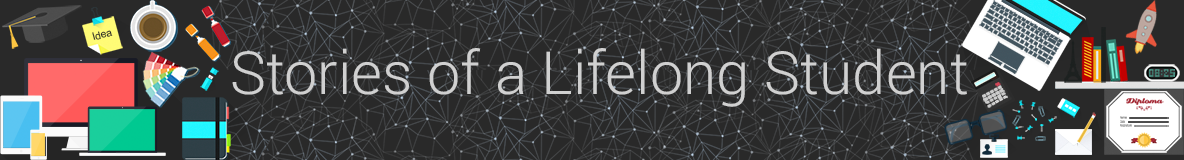
<style>
.page{position:relative;width:1184px;height:160px;background:#292929}
.page>*{position:absolute;margin:0}
.t1{font:10.3px "ArialMT";color:#292929}
.t2{font:59.6px "Roboto-Light";color:#d0d0d0}
</style>
<div class="page">
<p class="t1" style="left:92px;top:30px;width:21px;height:10px;rotate:-15deg">Idea</p>
<p class="t2" style="left:232px;top:48px;width:735px;height:59px">Stories of a Lifelong Student</p>
</div>
